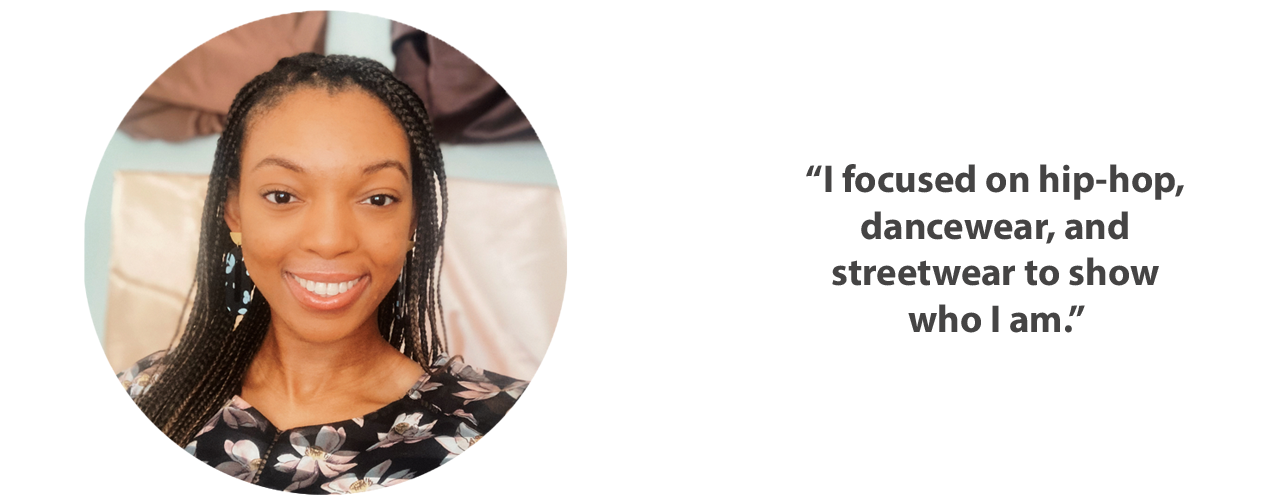
<style>
.page{position:relative;width:1280px;height:500px;background:#ffffff}
.page>*{position:absolute;margin:0}
.t1{font:38.8px "MyriadPro-Bold";color:#454444}
</style>
<div class="page">
<p class="t1" style="left:806px;top:164px;width:378px;height:169px;text-align:center">“I focused on hip-hop, dancewear, and streetwear to show who I am.”</p>
</div>
